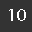
<style>
.page{position:relative;width:32px;height:32px;background:#333333}
.page>*{position:absolute;margin:0}
.t1{font:17.8px "MyriadPro-Regular";color:#ffffff;scale:1.12 1}
</style>
<div class="page">
<p class="t1" style="left:9px;top:9px;width:17px;height:12px">10</p>
</div>
